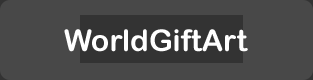
<style>
.page{position:relative;width:313px;height:80px;background:#484848}
.page>*{position:absolute;margin:0}
.t1{font:30px "ArialRoundedMTBold";color:#ffffff}
</style>
<div class="page">
<p class="t1" style="left:64px;top:29px;width:184px;height:23px">WorldGiftArt</p>
</div>
